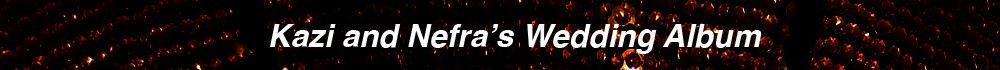
<style>
.page{position:relative;width:1000px;height:70px;background:#000000}
.page>*{position:absolute;margin:0}
.t1{font:31.6px "Helvetica-BoldOblique";color:#ffffff}
</style>
<div class="page">
<p class="t1" style="left:270px;top:24px;width:492px;height:30px">Kazi and Nefra’s Wedding Album</p>
</div>
